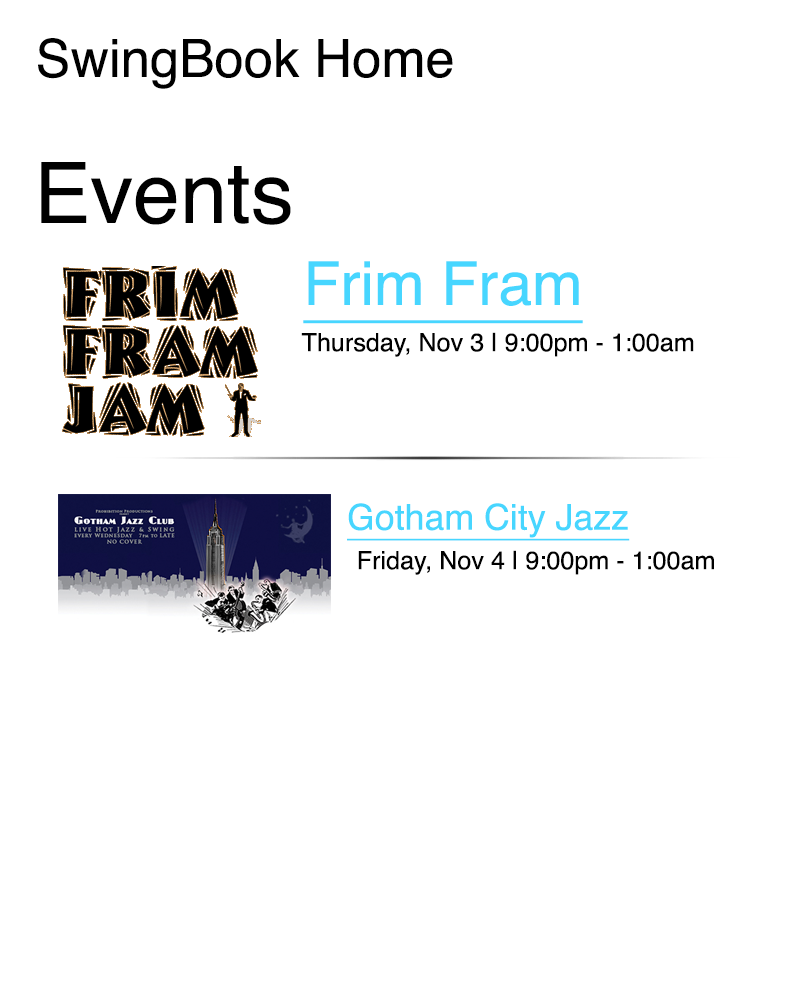
<style>
.page{position:relative;width:800px;height:1000px;background:#ffffff}
.page>*{position:absolute;margin:0}
.t1{font:52.7px "Helvetica";color:#000000}
.t2{font:84.7px "Helvetica";color:#000000}
.t3{font:60.5px "Helvetica";color:#47d6ff;text-decoration:underline}
.t4{font:25.1px "Helvetica";color:#000000}
.t5{font:35.7px "Helvetica";color:#47d6ff;text-decoration:underline}
</style>
<div class="page">
<p class="t1" style="left:38px;top:38px;width:415px;height:51px">SwingBook Home</p>
<p class="t2" style="left:41px;top:162px;width:250px;height:63px">Events</p>
<p class="t3" style="left:303px;top:261px;width:280px;height:63px">Frim Fram</p>
<p class="t4" style="left:301px;top:332px;width:393px;height:25px">Thursday, Nov 3 | 9:00pm - 1:00am</p>
<p class="t5" style="left:347px;top:503px;width:283px;height:38px">Gotham City Jazz</p>
<p class="t4" style="left:358px;top:550px;width:356px;height:25px">Friday, Nov 4 | 9:00pm - 1:00am</p>
</div>
